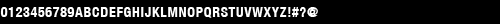
<style>
.page{position:relative;width:500px;height:24px;background:#000000}
.page>*{position:absolute;margin:0}
.t1{font:14px "HelveticaNeue-CondensedBold";letter-spacing:0.05em;color:#ffffff}
</style>
<div class="page">
<p class="t1" style="left:0px;top:7px;width:318px;height:11px">0123456789ABCDEFGHIJKLMNOPQRSTUVWXYZ!#?@</p>
</div>
